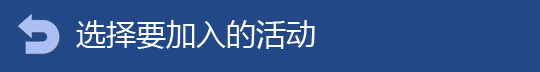
<style>
.page{position:relative;width:540px;height:72px;background:#224888}
.page>*{position:absolute;margin:0}
.t1{font:30px "MicrosoftYaHei";color:#ffffff}
</style>
<div class="page">
<p class="t1" style="left:76px;top:20px;width:239px;height:29px">选择要加入的活动</p>
</div>
